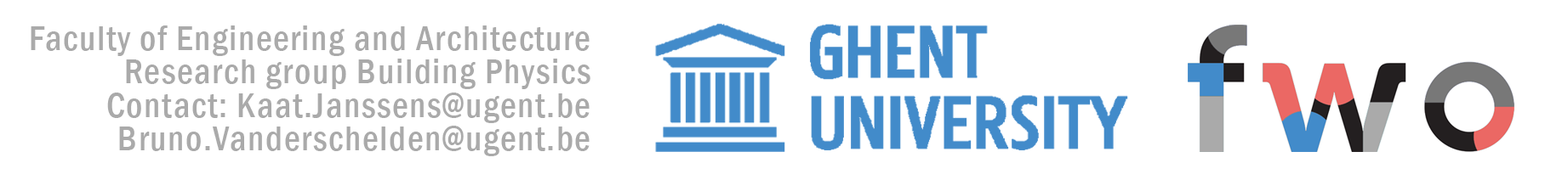
<style>
.page{position:relative;width:1568px;height:180px;background:#ffffff}
.page>*{position:absolute;margin:0}
.t1{font:35.4px/33.7px "FranklinGothic-MediumCond";letter-spacing:0.042em;color:#aaaaaa}
</style>
<div class="page">
<p class="t1" style="left:31px;top:26px;width:559px;height:131px;text-align:right">Faculty of Engineering and Architecture<br>Research group Building Physics<br>Contact: Kaat.Janssens@ugent.be<br>Bruno.Vanderschelden@ugent.be</p>
</div>
